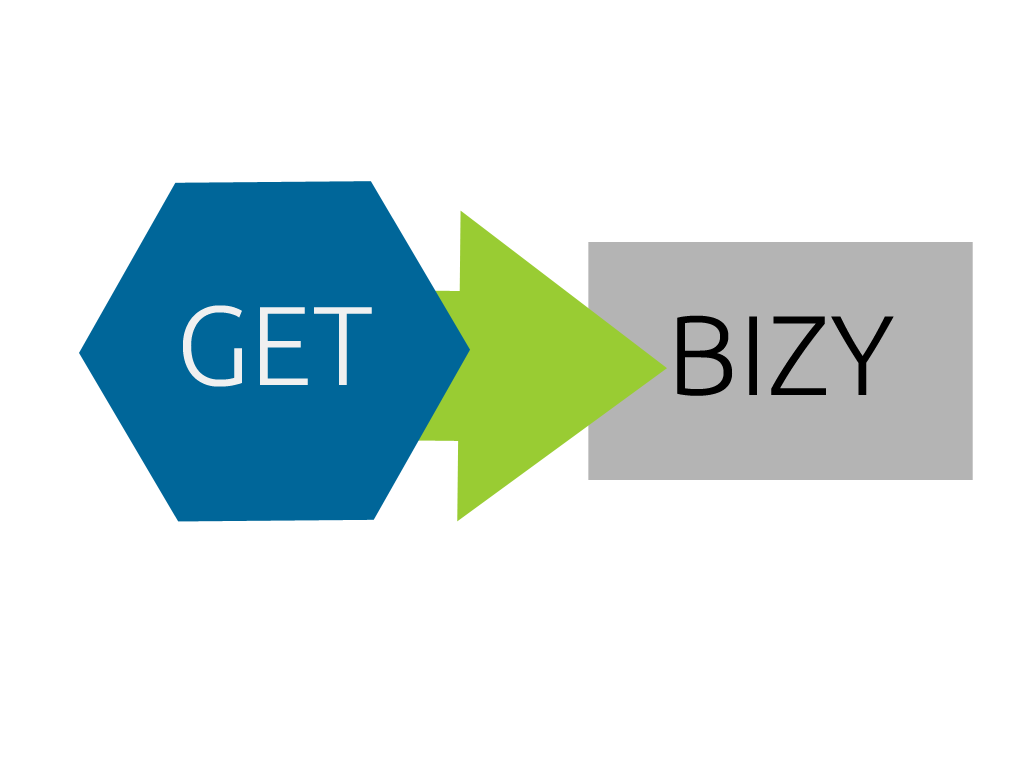
<style>
.page{position:relative;width:1024px;height:768px;background:#ffffff}
.page>*{position:absolute;margin:0}
.t1{font:112.3px "Ubuntu-Light";color:#f0f0f0}
.t2{font:113.3px "Ubuntu-Light";color:#000000}
</style>
<div class="page">
<p class="t1" style="left:183px;top:305px;width:189px;height:82px">GET</p>
<p class="t2" style="left:677px;top:315px;width:217px;height:81px">BIZY</p>
</div>
